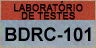
<style>
.page{position:relative;width:96px;height:48px}
.page>*{position:absolute;margin:0}
.t1{font:9px/8px "ArialMT";color:#000000;font-weight:bold;scale:1.04 1}
</style>
<div class="page">
<p class="t1" style="left:14px;top:1px;width:69px;height:19px;text-align:center">LABORATÓRIO<br>DE TESTES</p>
</div>
